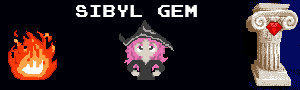
<style>
.page{position:relative;width:300px;height:90px;background:#000008}
.page>*{position:absolute;margin:0}
.t1{font:18px "Joystix";color:#ffffff}
</style>
<div class="page">
<p class="t1" style="left:76px;top:5px;width:121px;height:12px">Sibyl Gem</p>
</div>
